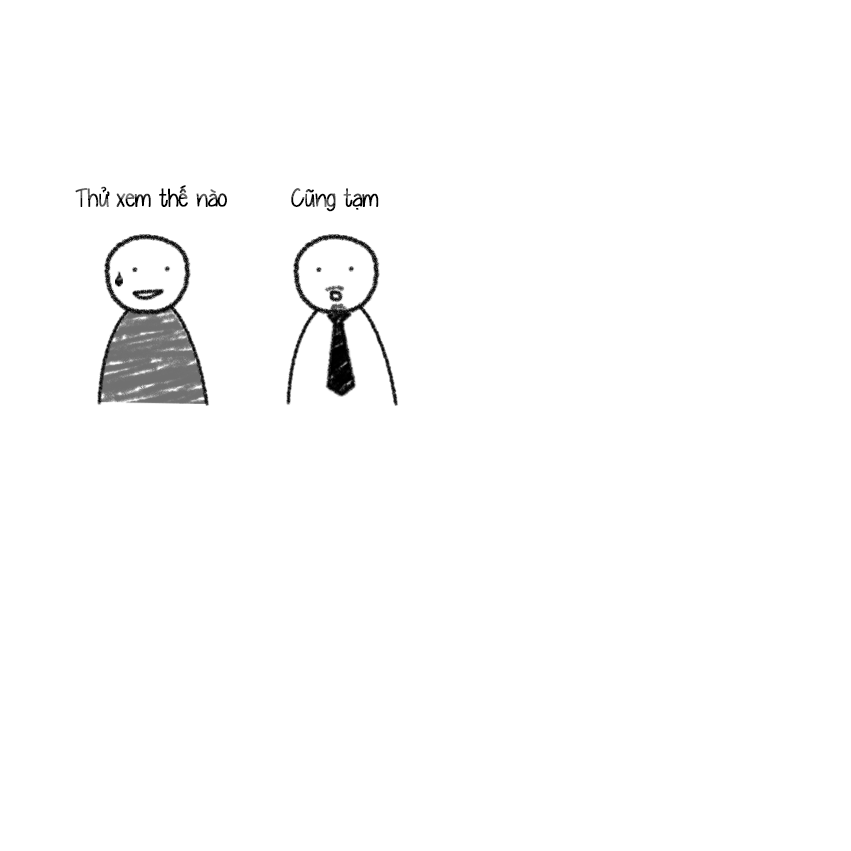
<style>
.page{position:relative;width:851px;height:851px;background:#ffffff}
.page>*{position:absolute;margin:0}
.t1{font:25px "UVFYummyCupcakes";letter-spacing:-0.02em;font-weight:bold}
</style>
<div class="page">
<p class="t1" style="left:75px;top:185px;width:152px;height:22px">Thử xem thế nào</p>
<p class="t1" style="left:291px;top:188px;width:88px;height:24px">Cũng tạm</p>
</div>
